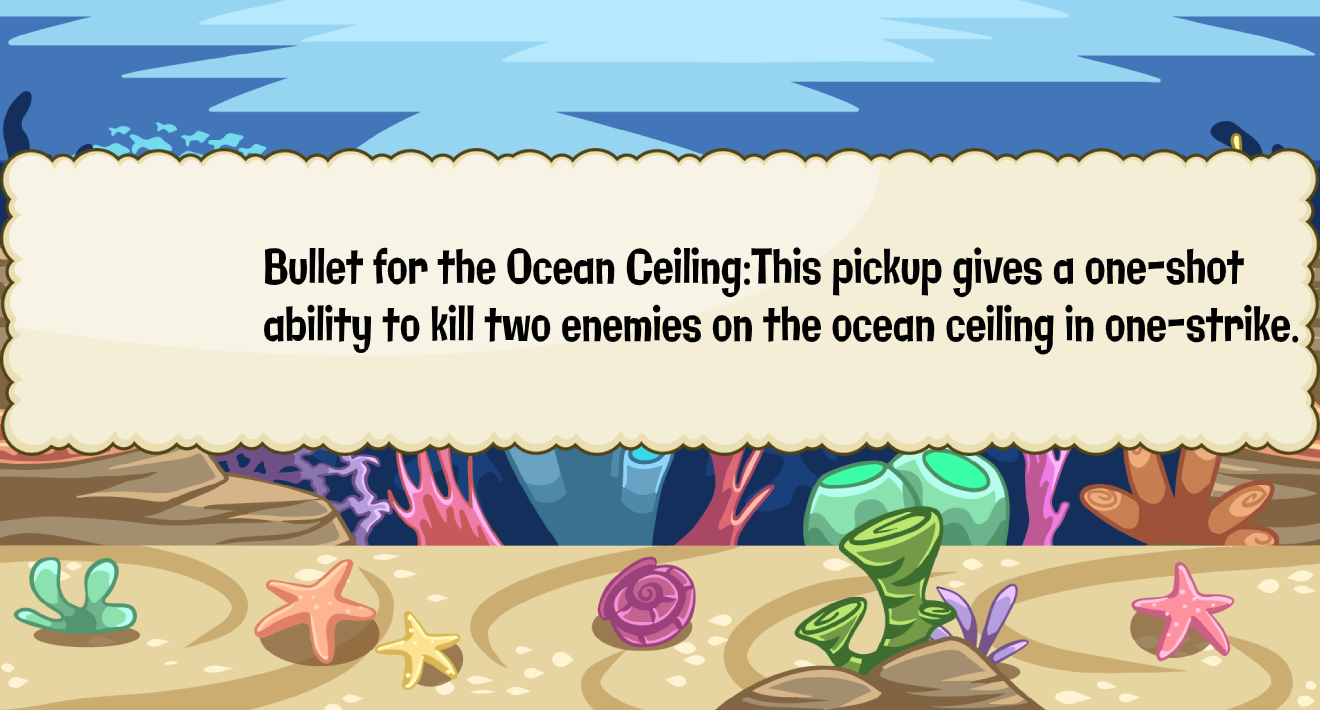
<style>
.page{position:relative;width:1320px;height:710px;background:#f4eed7}
.page>*{position:absolute;margin:0}
.t1{font:47.9px "Galindo-Regular";color:#000000;scale:0.71 1}
</style>
<div class="page">
<p class="t1" style="left:264px;top:247px;width:1035px;height:108px">Bullet for the Ocean Ceiling:This pickup gives a one-shot<br>ability to kill two enemies on the ocean ceiling in one-strike.</p>
</div>
